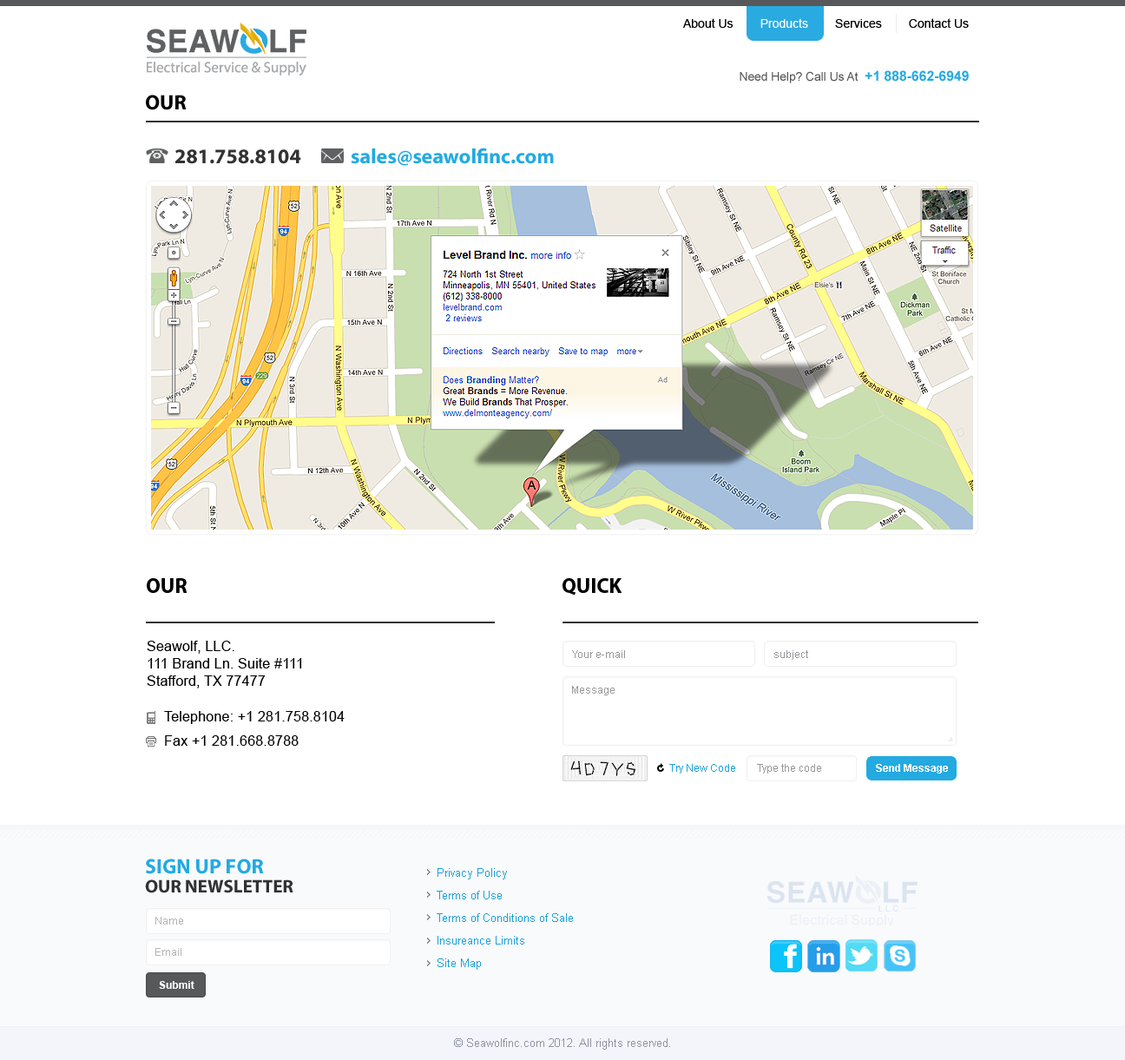
<style>
.page{position:relative;width:1125px;height:1060px;background:#ffffff}
.page>*{position:absolute;margin:0}
.t1{font:12.2px "ArialMT";color:#000000}
.t2{font:12.2px "ArialMT";color:#fdfdfd}
.t3{font:12.2px "ArialMT";color:#555555}
.t4{font:13.9px "Arial-BoldMT";color:#23aae1}
.t5{font:20.8px "MyriadPro-Bold";color:#000000;text-transform:uppercase}
.t6{font:20.8px "MyriadPro-Bold";color:#323232}
.t7{font:20.8px "MyriadPro-Bold";color:#23aae1}
.t8{font:13.9px/17.4px "ArialMT";color:#000000}
.t9{font:10.4px "ArialMT";color:#96979a}
.t10{font:13.9px/20.8px "ArialMT";color:#000000}
.t11{font:13.9px/24.3px "ArialMT";color:#000000}
.t12{font:10.4px "ArialMT";color:#1da0d5}
.t13{font:10.4px "Arial-BoldMT";color:#ffffff}
.t14{font:18.2px/19.1px "MyriadPro-Bold";color:#323232;text-transform:uppercase}
.t15{font:20.8px/19.1px "MyriadPro-Bold";color:#23aae1;text-transform:uppercase}
.t16{font:11.3px/22.6px "ArialMT";color:#1da0d5}
.t17{font:10.4px "ArialMT";color:#b4b4b4}
.t18{font:11.3px "ArialMT";color:#9094a3}
</style>
<div class="page">
<p class="t1" style="left:683px;top:18px;width:286px;height:10px">About Us     <span class="t2">   Products        </span>Services        Contact Us</p>
<p class="t3" style="left:740px;top:70px;width:229px;height:13px">Need Help? Call Us At  <span class="t4">+1 888-662-6949</span></p>
<p class="t5" style="left:146px;top:95px;width:41px;height:15px">Our</p>
<p class="t6" style="left:175px;top:149px;width:126px;height:15px">281.758.8104</p>
<p class="t7" style="left:351px;top:148px;width:203px;height:18px">sales@seawolfinc.com</p>
<p class="t5" style="left:147px;top:578px;width:41px;height:15px">OUR</p>
<p class="t5" style="left:563px;top:578px;width:59px;height:17px">QUICK</p>
<p class="t8" style="left:147px;top:641px;width:155px;height:47px">Seawolf, LLC. <br>111 Brand Ln. Suite #111<br>Stafford, TX 77477</p>
<p class="t9" style="left:572px;top:650px;width:53px;height:8px">Your e-mail</p>
<p class="t9" style="left:774px;top:650px;width:34px;height:10px">subject</p>
<p class="t9" style="left:572px;top:686px;width:43px;height:9px">Message</p>
<p class="t10" style="left:164px;top:711px;width:181px;height:35px">Telephone: +1 281.758.8104<br><span class="t11">Fax +1 281.668.8788</span></p>
<p class="t12" style="left:669px;top:764px;width:66px;height:9px">Try New Code</p>
<p class="t9" style="left:757px;top:764px;width:64px;height:9px">Type the code</p>
<p class="t13" style="left:876px;top:764px;width:72px;height:9px">Send Message</p>
<p class="t14" style="left:145px;top:859px;width:148px;height:34px"><span class="t15">Sign up for <br></span>our Newsletter</p>
<p class="t16" style="left:437px;top:868px;width:136px;height:102px">Privacy Policy<br>Terms of Use <br>Terms of Conditions of Sale <br>Insureance Limits <br>Site Map</p>
<p class="t17" style="left:155px;top:917px;width:28px;height:7px">Name</p>
<p class="t17" style="left:155px;top:948px;width:26px;height:8px">Email</p>
<p class="t13" style="left:159px;top:981px;width:35px;height:8px">Submit</p>
<p class="t18" style="left:454px;top:1038px;width:216px;height:12px">© Seawolfinc.com 2012. All rights reserved.</p>
</div>
